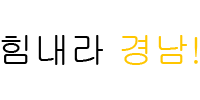
<style>
.page{position:relative;width:200px;height:100px;background:#ffffff}
.page>*{position:absolute;margin:0}
.t1{font:36px "Gulim";color:#000000}
.t2{font:36px "Gulim";color:#ffc600}
</style>
<div class="page">
<p class="t1" style="left:1px;top:35px;width:197px;height:30px">힘내라 <span class="t2">경남!</span></p>
</div>
